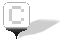
<style>
.page{position:relative;width:64px;height:41px;background:#ffffff}
.page>*{position:absolute;margin:0}
.t1{font:24px "Small Fonts";color:#cccccc}
</style>
<div class="page">
<p class="t1" style="left:9px;top:6px;width:15px;height:18px">C</p>
</div>
